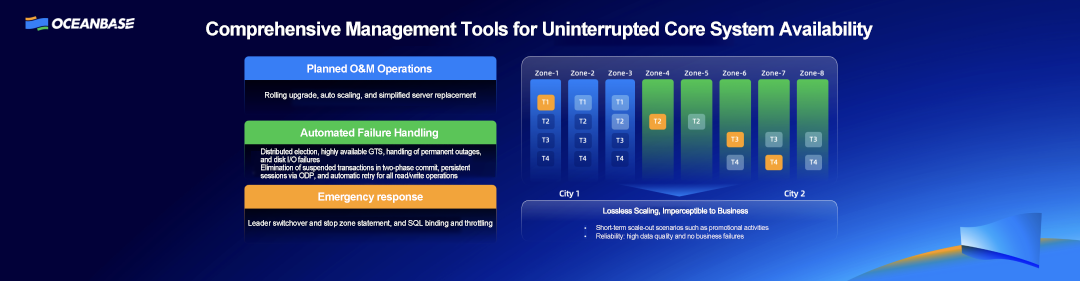
<style>
.page{position:relative;width:1080px;height:281px;background:#020139}
.page>*{position:absolute;margin:0}
.t1{font:19px "Arial-BoldMT";letter-spacing:-0.03em;color:#ffffff}
.t2{font:11px "Arial-BoldMT";letter-spacing:-0.03em;color:#ffffff}
.t3{font:8px "ArialMT";letter-spacing:-0.03em;color:#ffffff}
.t4{font:8px/8px "ArialMT";letter-spacing:-0.03em;color:#ffffff;scale:0.9 1}
.t5{font:7px/8.5px "ArialMT";letter-spacing:-0.03em}
</style>
<div class="page">
<p class="t1" style="left:206px;top:21px;width:667px;height:19px">Comprehensive Management Tools for Uninterrupted Core System Availability</p>
<p class="t2" style="left:307px;top:64px;width:125px;height:11px">Planned O&amp;M Operations</p>
<p class="t3" style="left:265px;top:92px;width:211px;height:8px">Rolling upgrade, auto scaling, and simplified server replacement</p>
<p class="t2" style="left:300px;top:128px;width:138px;height:11px">Automated Failure Handling</p>
<p class="t4" style="left:260px;top:148px;width:221px;height:32px">Distributed election, highly available GTS, handling of permanent outages, and disk I/O failures<br>Elimination of suspended transactions in two-phase commit, persistent sessions via ODP, and automatic retry for all read/write operations</p>
<p class="t2" style="left:318px;top:192px;width:105px;height:11px">Emergency response</p>
<p class="t3" style="left:603px;top:207px;width:145px;height:9px">Lossless Scaling, Imperceptible to Business</p>
<p class="t3" style="left:248px;top:220px;width:245px;height:8px">Leader switchover and stop zone statement, and SQL binding and throttling</p>
<p class="t5" style="left:596px;top:225px;width:173px;height:15px">Short-term scale-out scenarios such as promotional activities<br>Reliability: high data quality and no business failures</p>
</div>
